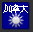
<style>
.page{position:relative;width:33px;height:32px;background:#000090}
.page>*{position:absolute;margin:0}
.t1{font:10.4px "SimSun";letter-spacing:-0.25em;color:#ffffff}
</style>
<div class="page">
<p class="t1" style="left:3px;top:4px;width:25px;height:9px">加拿大</p>
</div>
